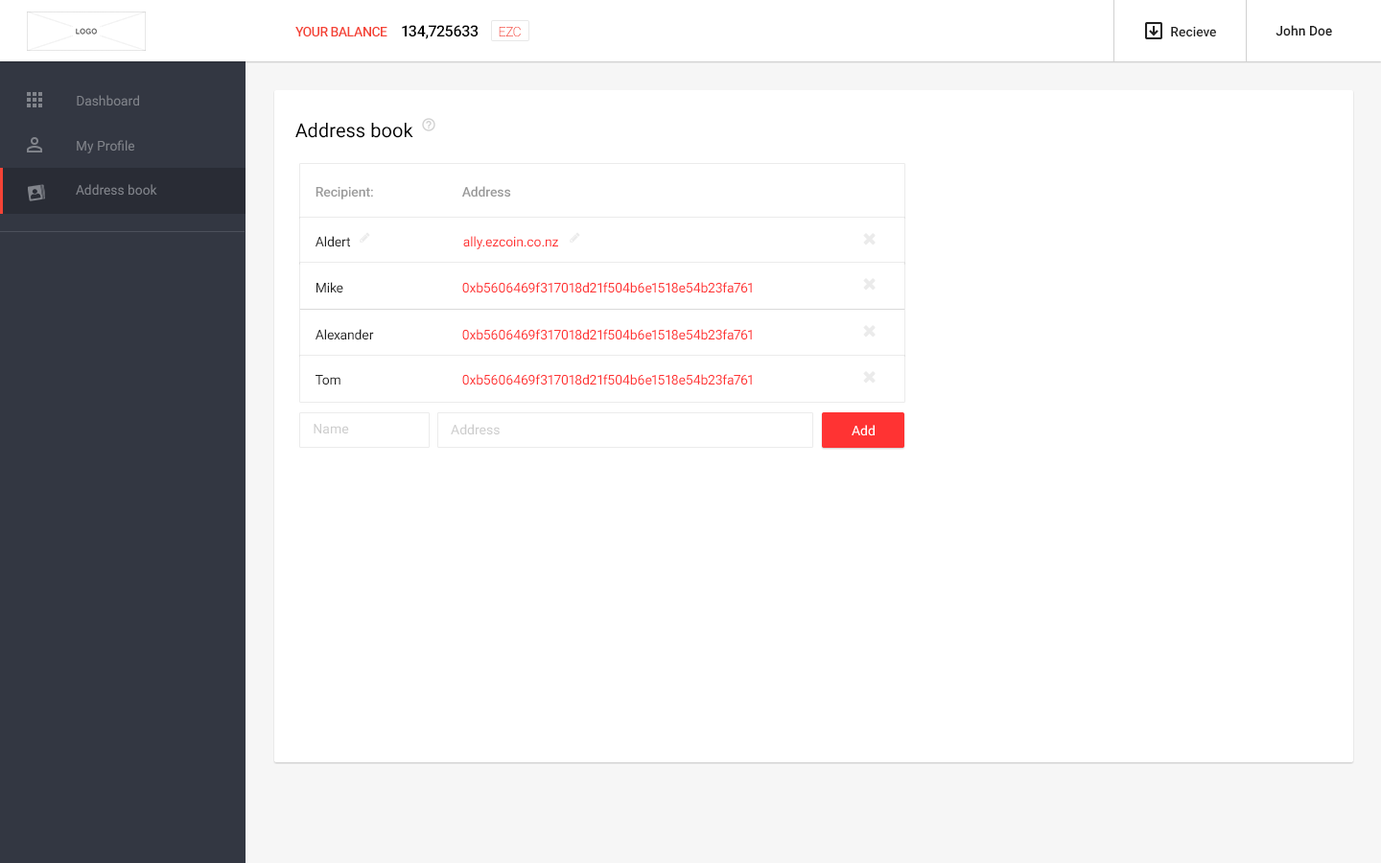
<style>
.page{position:relative;width:1381px;height:863px;background:#ffffff}
.page>*{position:absolute;margin:0}
.t1{font:13.4px "Roboto-Medium";letter-spacing:-0.04em;color:#f44336;text-transform:uppercase}
.t2{font:15.3px "Roboto-Medium";letter-spacing:-0.02em;color:#000000}
.t3{font:13.4px "Roboto-Light";letter-spacing:-0.04em;color:#f44336}
.t4{font:13.4px "Roboto-Medium";color:#212121}
.t5{font:13.4px "Roboto-Regular";color:#81848b}
.t6{font:19.2px "Roboto-Regular";letter-spacing:0.005em;color:#000000}
.t7{font:13.4px "Roboto-Medium";letter-spacing:-0.01em;color:#9a9a9a}
.t8{font:13.4px "Roboto-Regular";letter-spacing:-0.01em;color:#212121}
.t9{font:13.4px "Roboto-Regular";letter-spacing:-0.01em;color:#ff3333}
.t10{font:13.4px "Roboto-Regular";color:#cccccc}
.t11{font:13.4px "Roboto-Regular";color:#ffffff}
</style>
<div class="page">
<p class="t1" style="left:295px;top:26px;width:93px;height:11px">Your balance</p>
<p class="t2" style="left:402px;top:25px;width:77px;height:14px">134,725633</p>
<p class="t3" style="left:499px;top:26px;width:22px;height:11px">EZC</p>
<p class="t4" style="left:1171px;top:26px;width:45px;height:11px">Recieve</p>
<p class="t4" style="left:1276px;top:25px;width:56px;height:11px">John Doe</p>
<p class="t5" style="left:77px;top:95px;width:62px;height:11px">Dashboard</p>
<p class="t6" style="left:295px;top:123px;width:118px;height:15px">Address book</p>
<p class="t5" style="left:77px;top:140px;width:57px;height:13px">My Profile</p>
<p class="t5" style="left:76px;top:184px;width:81px;height:12px">Address book</p>
<p class="t7" style="left:316px;top:186px;width:57px;height:14px">Recipient:</p>
<p class="t7" style="left:461px;top:186px;width:50px;height:12px">Address</p>
<p class="t8" style="left:316px;top:236px;width:34px;height:11px">Aldert</p>
<p class="t9" style="left:463px;top:236px;width:95px;height:13px">ally.ezcoin.со.nz</p>
<p class="t8" style="left:317px;top:282px;width:26px;height:12px">Mike</p>
<p class="t9" style="left:462px;top:282px;width:290px;height:12px">0xb5606469f317018d21f504b6e1518e54b23fa761</p>
<p class="t8" style="left:316px;top:329px;width:58px;height:12px">Alexander</p>
<p class="t9" style="left:462px;top:329px;width:290px;height:12px">0xb5606469f317018d21f504b6e1518e54b23fa761</p>
<p class="t8" style="left:316px;top:375px;width:25px;height:11px">Tom</p>
<p class="t9" style="left:462px;top:374px;width:290px;height:12px">0xb5606469f317018d21f504b6e1518e54b23fa761</p>
<p class="t10" style="left:314px;top:424px;width:35px;height:11px">Name</p>
<p class="t10" style="left:451px;top:424px;width:49px;height:11px">Address</p>
<p class="t11" style="left:852px;top:425px;width:23px;height:11px">Add</p>
</div>
